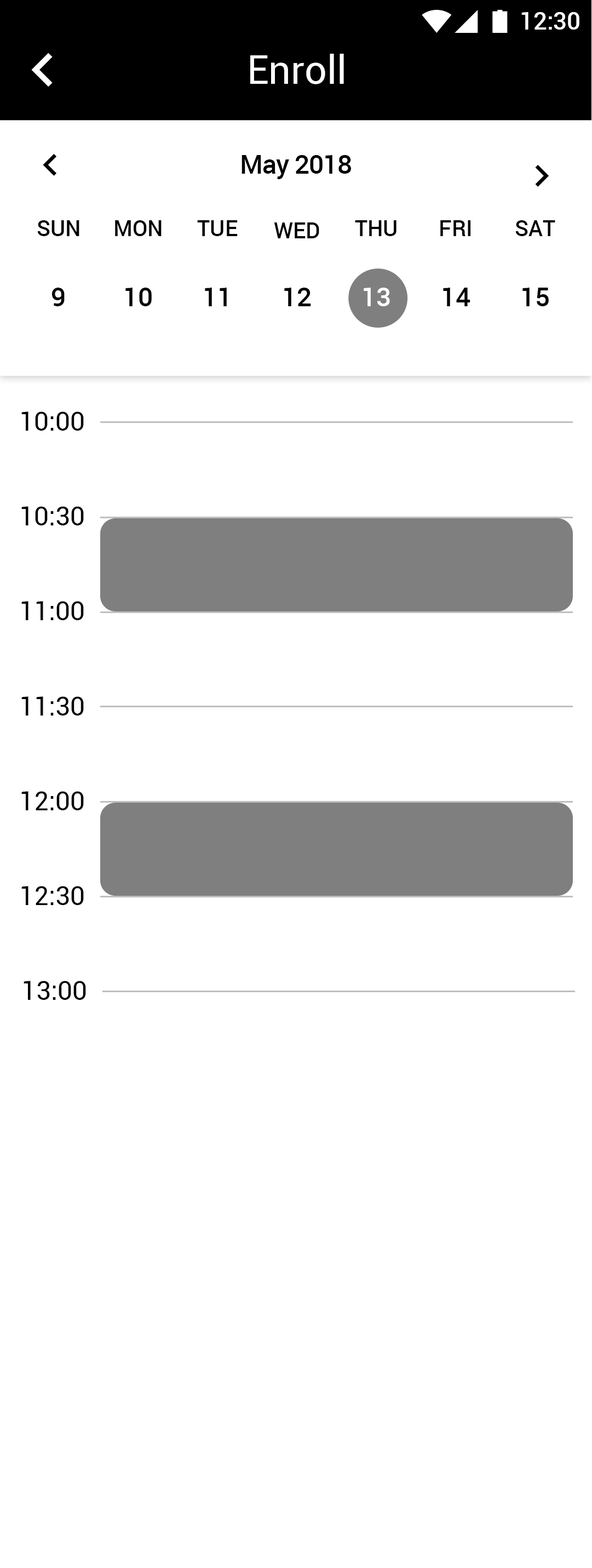
<style>
.page{position:relative;width:592px;height:1568px;background:#ffffff}
.page>*{position:absolute;margin:0}
.t1{font:24.1px "Roboto-Medium";color:#ffffff}
.t2{font:39.4px "Roboto-Regular";color:#ffffff}
.t3{font:26.3px "Roboto-Medium";letter-spacing:-0.023em;color:#000000}
.t4{font:21.8px "Roboto-Medium";color:#000000}
.t5{font:26.3px "Roboto-Medium";color:#000000}
.t6{font:26.3px "Roboto-Medium";color:#ffffff}
.t7{font:26.3px "Roboto-Regular";color:#000000}
</style>
<div class="page">
<p class="t1" style="left:522px;top:12px;width:58px;height:18px">12:30</p>
<p class="t2" style="left:250px;top:54px;width:94px;height:30px">Enroll</p>
<p class="t3" style="left:242px;top:155px;width:109px;height:24px">Мay 2018</p>
<p class="t4" style="left:37px;top:220px;width:42px;height:16px">SUN</p>
<p class="t4" style="left:115px;top:220px;width:47px;height:16px">MON</p>
<p class="t4" style="left:197px;top:220px;width:41px;height:16px">TUE</p>
<p class="t4" style="left:355px;top:220px;width:42px;height:16px">THU</p>
<p class="t4" style="left:440px;top:220px;width:31px;height:16px">FRI</p>
<p class="t4" style="left:516px;top:220px;width:40px;height:16px">SAT</p>
<p class="t4" style="left:274px;top:222px;width:45px;height:16px">WED</p>
<p class="t5" style="left:51px;top:288px;width:14px;height:18px">9</p>
<p class="t5" style="left:125px;top:288px;width:27px;height:18px">10</p>
<p class="t5" style="left:205px;top:288px;width:22px;height:18px">11</p>
<p class="t5" style="left:284px;top:288px;width:27px;height:18px">12</p>
<p class="t6" style="left:364px;top:288px;width:26px;height:18px">13</p>
<p class="t5" style="left:443px;top:288px;width:28px;height:18px">14</p>
<p class="t5" style="left:523px;top:288px;width:26px;height:18px">15</p>
<p class="t7" style="left:21px;top:411px;width:63px;height:20px">10:00</p>
<p class="t7" style="left:21px;top:506px;width:63px;height:19px">10:30</p>
<p class="t7" style="left:21px;top:601px;width:63px;height:19px">11:00</p>
<p class="t7" style="left:21px;top:696px;width:63px;height:20px">11:30</p>
<p class="t7" style="left:21px;top:791px;width:63px;height:19px">12:00</p>
<p class="t7" style="left:21px;top:886px;width:63px;height:19px">12:30</p>
<p class="t7" style="left:24px;top:981px;width:62px;height:19px">13:00</p>
</div>
